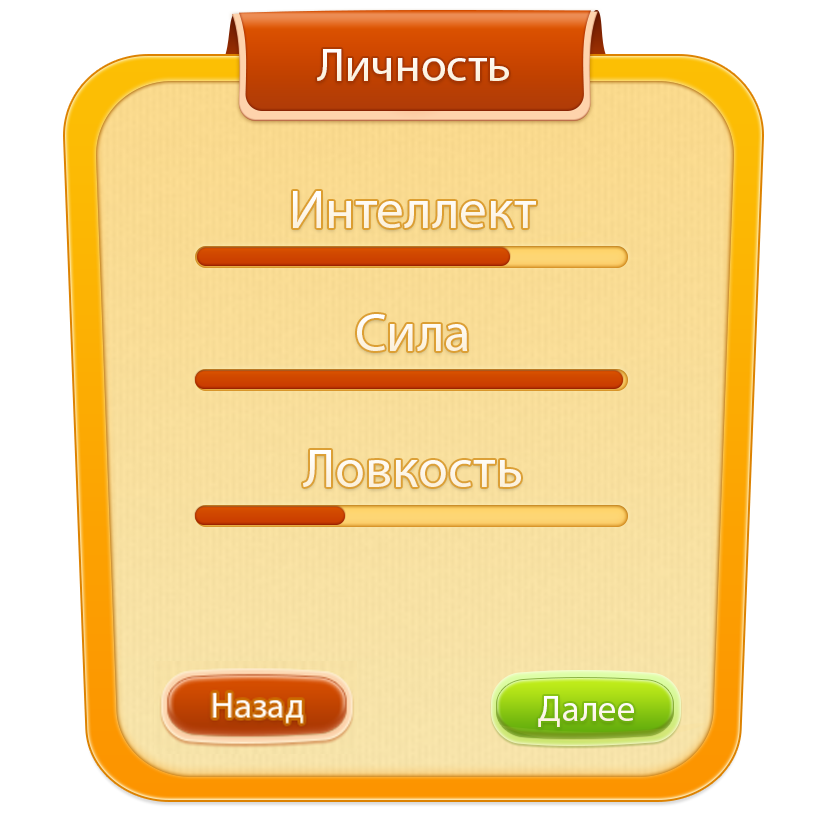
<style>
.page{position:relative;width:816px;height:838px;background:#ffffff}
.page>*{position:absolute;margin:0}
.t1{font:47.1px "MyriadPro-Regular";color:#fdf6e8}
.t2{font:54.6px "MyriadPro-Regular";color:#ffffff}
.t3{font:54.6px "MyriadPro-Regular";color:#fdf6e8}
.t4{font:36.8px "MyriadPro-Regular";color:#ffffff}
</style>
<div class="page">
<p class="t1" style="left:317px;top:49px;width:192px;height:32px">Личность</p>
<p class="t2" style="left:293px;top:191px;width:243px;height:37px">Интеллект</p>
<p class="t3" style="left:357px;top:314px;width:111px;height:37px">Сила</p>
<p class="t3" style="left:303px;top:450px;width:218px;height:37px">Ловкость</p>
<p class="t4" style="left:538px;top:696px;width:96px;height:31px">Далее</p>
</div>
